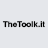
<style>
.page{position:relative;width:48px;height:48px;background:#e5e7eb}
.page>*{position:absolute;margin:0}
.t1{font:8px "Helvetica-Bold";color:#000000}
</style>
<div class="page">
<p class="t1" style="left:2px;top:21px;width:43px;height:7px">TheToolk.it</p>
</div>
